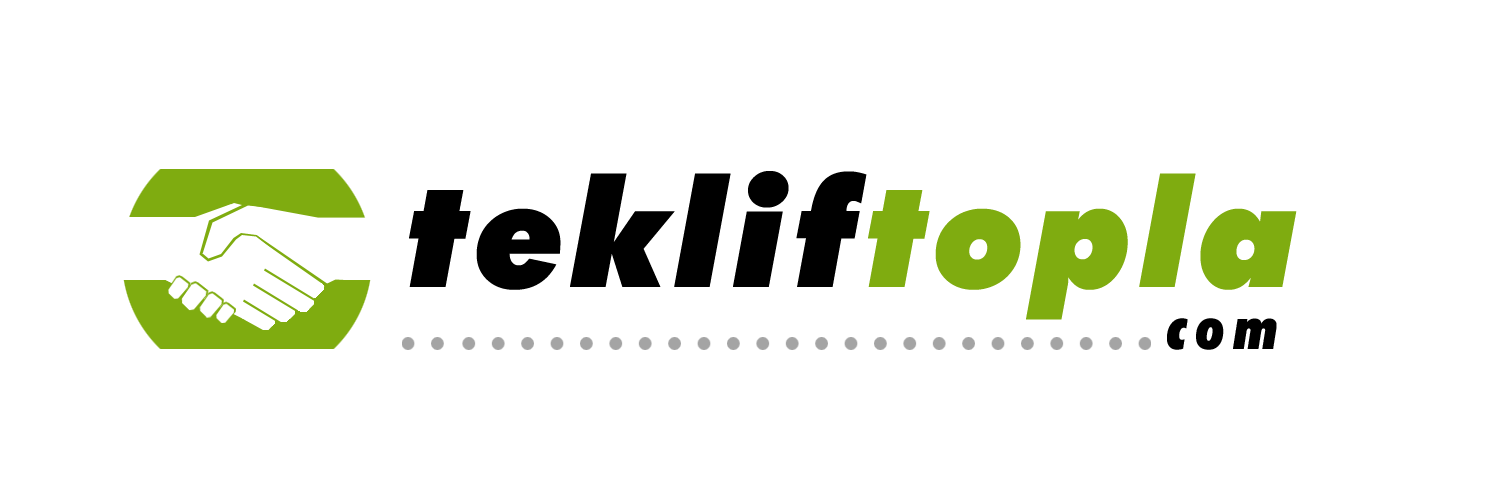
<style>
.page{position:relative;width:1500px;height:500px;background:#ffffff}
.page>*{position:absolute;margin:0}
.t1{font:150px "FuturaBT-ExtraBlackItalic";letter-spacing:0.04em;color:#000000}
.t2{font:150px "FuturaBT-ExtraBlackItalic";letter-spacing:0.04em;color:#7fac10}
.t3{font:60px "FuturaBT-ExtraBlackCondItalic";letter-spacing:0.14em;color:#000000}
</style>
<div class="page">
<p class="t1" style="left:409px;top:171px;width:888px;height:149px">teklif<span class="t2">topla</span></p>
<p class="t3" style="left:1167px;top:318px;width:110px;height:32px">com</p>
</div>
